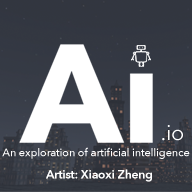
<style>
.page{position:relative;width:192px;height:192px}
.page>*{position:absolute;margin:0}
.t1{font:21.4px "AvenirNext-Regular";letter-spacing:-0.01em;color:#ffffff}
.t2{font:11px "AvenirNext-Medium";letter-spacing:-0.01em;color:#ffffff}
.t3{font:12px "AvenirNext-DemiBold";letter-spacing:-0.01em;color:#ffffff}
</style>
<div class="page">
<p class="t1" style="left:162px;top:125px;width:21px;height:16px">.io</p>
<p class="t2" style="left:2px;top:147px;width:188px;height:12px">An exploration of artificial intelligence</p>
<p class="t3" style="left:46px;top:169px;width:106px;height:13px">Artist: Xiaoxi Zheng</p>
</div>
